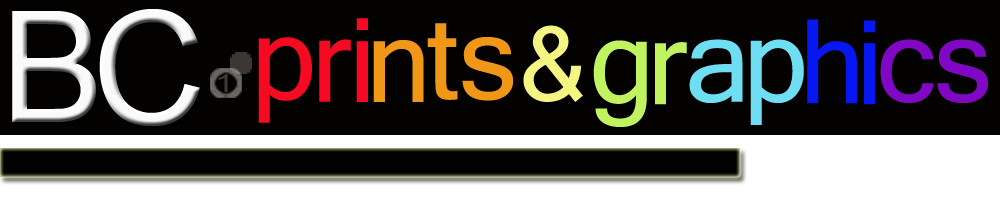
<style>
.page{position:relative;width:1000px;height:200px;background:#030200}
.page>*{position:absolute;margin:0}
.t1{font:216px "Utsaah";color:#fbfafa}
.t2{font:219.9px "Utsaah";color:#fbfafa}
.t3{font:112.8px "Kartika";color:#f60a22}
.t4{font:112.8px "Kartika";color:#f19717}
.t5{font:99.3px "Kartika";color:#f5f682}
.t6{font:112.8px "Kartika";color:#0717f2}
.t7{font:112.8px "Kartika";color:#c1f361}
.t8{font:112.8px "Kartika";color:#6edef2}
.t9{font:112.8px "Kartika";color:#8008c5}
.t10{font:33.8px "Utsaah";color:#3f3b3b;scale:1.38 1}
</style>
<div class="page">
<p class="t1" style="left:12px;top:11px;width:84px;height:111px">B</p>
<p class="t2" style="left:99px;top:9px;width:101px;height:117px">C</p>
<p class="t3" style="left:356px;top:18px;width:12px;height:84px">i</p>
<p class="t4" style="left:427px;top:23px;width:31px;height:77px">t</p>
<p class="t5" style="left:523px;top:25px;width:60px;height:77px">&amp;</p>
<p class="t6" style="left:807px;top:19px;width:50px;height:85px">h</p>
<p class="t6" style="left:864px;top:20px;width:11px;height:85px">i</p>
<p class="t3" style="left:258px;top:37px;width:54px;height:86px">p</p>
<p class="t3" style="left:319px;top:39px;width:32px;height:63px">r</p>
<p class="t4" style="left:373px;top:40px;width:51px;height:62px">n</p>
<p class="t4" style="left:462px;top:37px;width:51px;height:64px">s</p>
<p class="t7" style="left:593px;top:40px;width:54px;height:87px">g</p>
<p class="t8" style="left:689px;top:39px;width:54px;height:64px">a</p>
<p class="t8" style="left:750px;top:39px;width:54px;height:86px">p</p>
<p class="t9" style="left:880px;top:39px;width:54px;height:64px">c</p>
<p class="t9" style="left:937px;top:39px;width:51px;height:64px">s</p>
<p class="t7" style="left:655px;top:42px;width:32px;height:63px">r</p>
<p class="t10" style="left:218px;top:74px;width:10px;height:18px">1</p>
</div>
